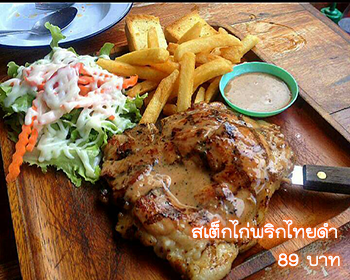
<style>
.page{position:relative;width:350px;height:280px}
.page>*{position:absolute;margin:0}
.t1{font:24px "THKodchasal";color:#ffffff}
</style>
<div class="page">
<p class="t1" style="left:191px;top:219px;width:149px;height:48px;text-align:right">สเต็กไก่พริกไทยดำ<br>บาท 89</p>
</div>
